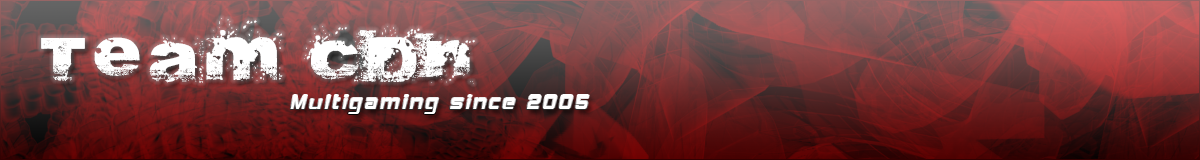
<style>
.page{position:relative;width:1200px;height:160px}
.page>*{position:absolute;margin:0}
.t1{font:50px "Abite";letter-spacing:0.2em;color:#ffffff}
.t2{font:24px "HemiHead426";letter-spacing:0.1em;color:#ffffff}
</style>
<div class="page">
<p class="t1" style="left:41px;top:18px;width:434px;height:66px">Team CdN</p>
<p class="t2" style="left:290px;top:95px;width:299px;height:19px">Multigaming since 2005</p>
</div>
